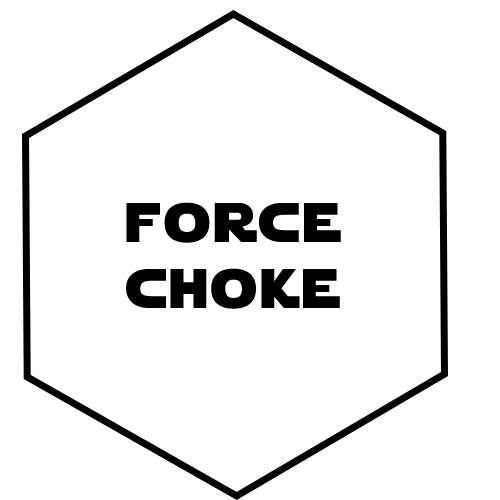
<style>
.page{position:relative;width:500px;height:500px;background:#ffffff}
.page>*{position:absolute;margin:0}
.t1{font:55px "StarJedi";letter-spacing:0.07em;color:#000000}
</style>
<div class="page">
<p class="t1" style="left:126px;top:202px;width:215px;height:107px;text-align:center">force<br>choke</p>
</div>
